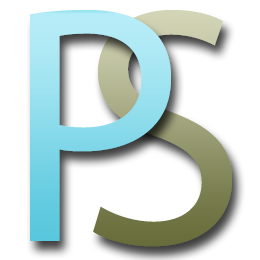
<style>
.page{position:relative;width:260px;height:260px;background:#ffffff}
.page>*{position:absolute;margin:0}
.t1{font:340px "MyriadPro-Regular"}
</style>
<div class="page">
<p class="t1" style="left:30px;top:10px;width:141px;height:231px">P</p>
<p class="t1" style="left:93px;top:10px;width:139px;height:237px">S</p>
</div>
